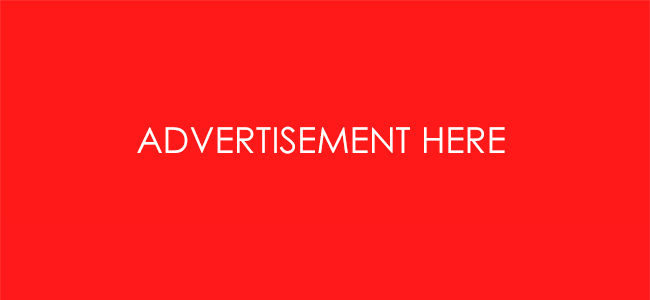
<style>
.page{position:relative;width:650px;height:300px;background:#ff1919}
.page>*{position:absolute;margin:0}
.t1{font:36px "CenturyGothic";color:#ffffff}
</style>
<div class="page">
<p class="t1" style="left:137px;top:126px;width:368px;height:28px">ADVERTISEMENT HERE</p>
</div>
